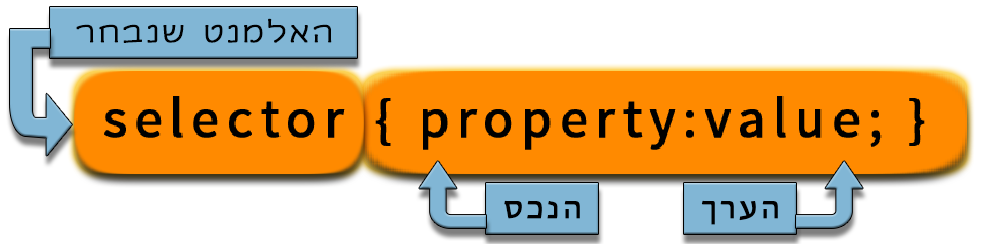
<style>
.page{position:relative;width:1000px;height:244px;background:#ffffff}
.page>*{position:absolute;margin:0}
.t1{font:31px "YehudaCLM-Light";letter-spacing:0.115em;color:#000000;font-weight:bold}
.t2{font:31px "MyriadHebrew-Regular";letter-spacing:0.115em;color:#000000;font-weight:bold}
</style>
<div class="page">
<p class="t1" style="left:76px;top:18px;width:256px;height:25px">האלמנט שנבחר</p>
<p class="t2" style="left:504px;top:200px;width:76px;height:19px">הנכס</p>
<p class="t2" style="left:701px;top:200px;width:77px;height:25px">הערך</p>
</div>
